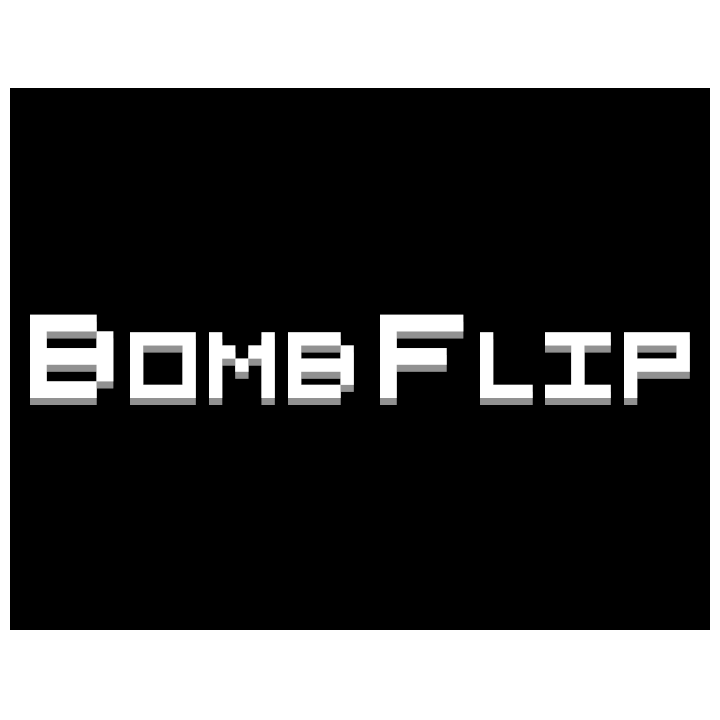
<style>
.page{position:relative;width:720px;height:720px;background:#000000}
.page>*{position:absolute;margin:0}
.t1{font:105.1px "5x5-Pixel";color:#ffffff}
.t2{font:133.1px "5x5-Pixel";color:#ffffff}
</style>
<div class="page">
<p class="t1" style="left:30px;top:314px;width:660px;height:84px"><span class="t2">B</span>Omb <span class="t2">f</span>LIP</p>
<p class="t1" style="left:30px;top:321px;width:660px;height:84px;opacity:0.42"><span class="t2">B</span>Omb <span class="t2">f</span>LIP</p>
</div>
